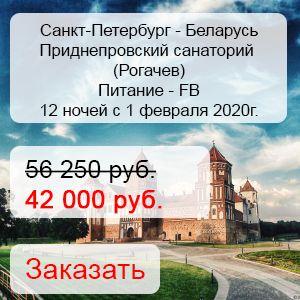
<style>
.page{position:relative;width:300px;height:300px}
.page>*{position:absolute;margin:0}
.t1{font:16.7px "ArialMT";color:#000000}
.t2{font:25px "ArialMT";color:#000000}
.t3{font:25px "ArialMT";color:#ff0000;font-weight:bold}
.t4{font:29.2px "ArialMT";color:#ff0000}
</style>
<div class="page">
<p class="t1" style="left:40px;top:24px;width:218px;height:95px;text-align:center">Санкт-Петербург - Беларусь<br>Приднепровский санаторий <br>(Рогачев)<br>Питание - FB<br>12 ночей с 1 февраля 2020г.</p>
<p class="t2" style="left:25px;top:160px;width:137px;height:54px">56 250 руб.<br><span class="t3">42 000 руб.</span></p>
<p class="t4" style="left:26px;top:258px;width:119px;height:21px">Заказать</p>
</div>
